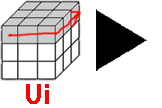
<style>
.page{position:relative;width:162px;height:108px;background:#ffffff}
.page>*{position:absolute;margin:0}
.t1{font:27px "MyriadPro-Regular";color:#ff0000;font-weight:bold}
</style>
<div class="page">
<p class="t1" style="left:26px;top:84px;width:23px;height:20px">Ui</p>
</div>
